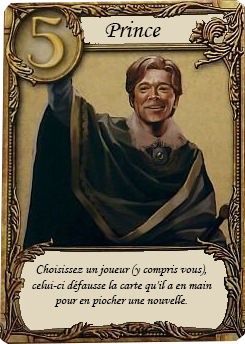
<style>
.page{position:relative;width:245px;height:344px}
.page>*{position:absolute;margin:0}
.t1{font:25px "MonotypeCorsiva";color:#000000}
.t2{font:13px "MonotypeCorsiva";color:#000000}
</style>
<div class="page">
<p class="t1" style="left:105px;top:21px;width:56px;height:16px">Prince</p>
<p class="t2" style="left:32px;top:264px;width:180px;height:43px;text-align:center">Choisissez un joueur (y compris vous), celui-ci défausse la carte qu'il a en main pour en piocher une nouvelle.</p>
</div>
